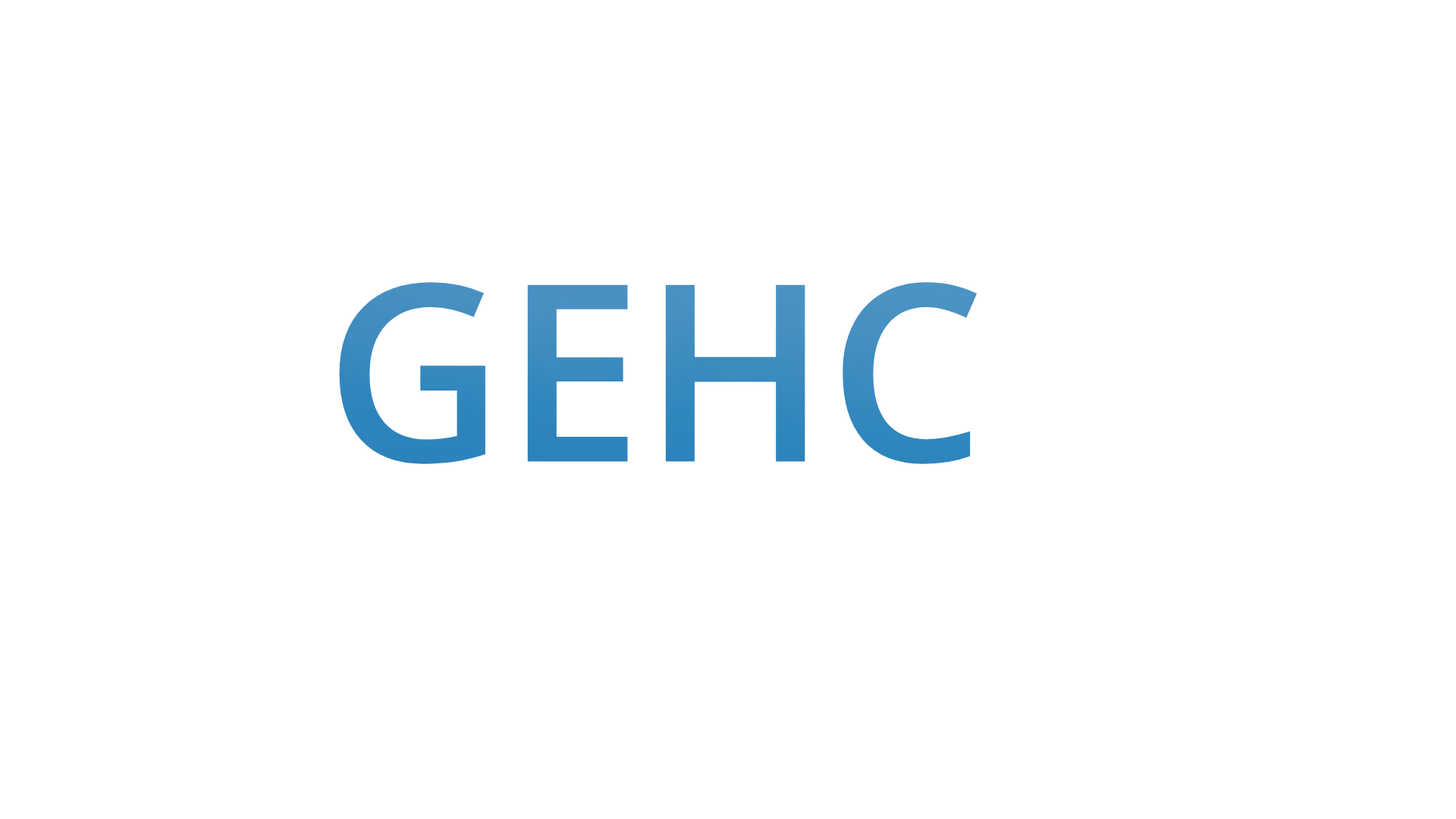
<style>
.page{position:relative;width:1456px;height:819px;background:#ffffff}
.page>*{position:absolute;margin:0}
.t1{font:265.4px "Khula-SemiBold";color:#398abf}
</style>
<div class="page">
<p class="t1" style="left:339px;top:281px;width:638px;height:183px">GEHC</p>
</div>
